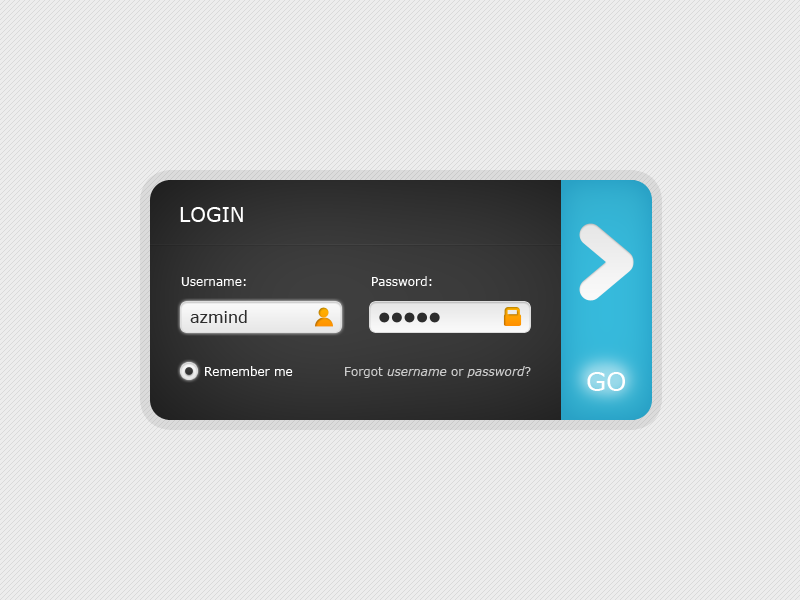
<style>
.page{position:relative;width:800px;height:600px;background:#ededed}
.page>*{position:absolute;margin:0}
.t1{font:20px "Verdana";color:#ffffff}
.t2{font:12px "Verdana";color:#ffffff}
.t3{font:16px "Verdana";color:#2d2d2d}
.t4{font:12px "Verdana-Italic";color:#cccccc}
.t5{font:12px "Verdana";color:#cccccc}
.t6{font:26px "Verdana";color:#ffffff}
</style>
<div class="page">
<p class="t1" style="left:180px;top:207px;width:63px;height:15px">LOGIN</p>
<p class="t2" style="left:181px;top:277px;width:65px;height:9px">Username:</p>
<p class="t2" style="left:372px;top:276px;width:60px;height:10px">Password:</p>
<p class="t3" style="left:190px;top:310px;width:57px;height:13px">azmind</p>
<p class="t2" style="left:205px;top:366px;width:88px;height:10px">Remember me</p>
<p class="t4" style="left:345px;top:366px;width:186px;height:12px"><span class="t5">Forgot </span>username<span class="t5"> or </span>password<span class="t5">?</span></p>
<p class="t6" style="left:587px;top:372px;width:38px;height:19px">GO</p>
</div>
